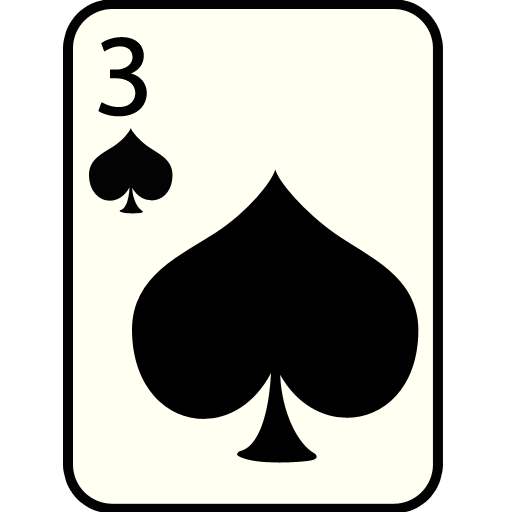
<style>
.page{position:relative;width:512px;height:512px;background:#fffff2}
.page>*{position:absolute;margin:0}
.t1{font:200px "MyriadPro-Regular";letter-spacing:-0.05em;color:#000000;font-variant:small-caps;font-weight:bold}
</style>
<div class="page">
<p class="t1" style="left:98px;top:37px;width:49px;height:80px">3</p>
</div>
